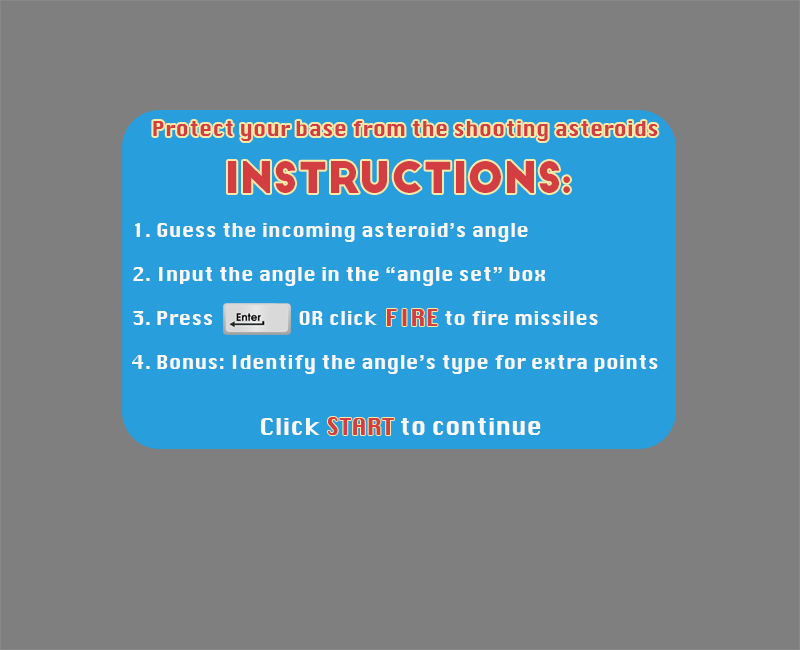
<style>
.page{position:relative;width:800px;height:650px;background:#7f7f7f}
.page>*{position:absolute;margin:0}
.t1{font:20px "Krungthep";letter-spacing:0.007em;color:#d33e43}
.t2{font:42px "BigJohn";color:#d33e43}
.t3{font:19px/44px "Krungthep";letter-spacing:0.007em;color:#f9f8f9}
.t4{font:20px/44px "Krungthep";letter-spacing:0.007em;color:#f9f8f9}
.t5{font:23.3px "Krungthep";color:#d33e43}
.t6{font:23.3px "Krungthep";color:#f9f8f9}
.t7{font:34.8px "Krungthep";color:#f9f8f9}
</style>
<div class="page">
<p class="t1" style="left:153px;top:121px;width:505px;height:20px">Protect your base from the shooting asteroids</p>
<p class="t2" style="left:228px;top:161px;width:342px;height:32px">instructions:</p>
<p class="t3" style="left:132px;top:223px;width:526px;height:151px"><span class="t4"><br></span>1. Guess the incoming asteroid’s angle <br>2. Input the angle in the “angle set” box<br>3. Press        OR click              to fire missiles <br>4. Bonus: Identify the angle’s type for extra points</p>
<p class="t5" style="left:387px;top:309px;width:51px;height:17px">FIRE</p>
<p class="t6" style="left:261px;top:418px;width:280px;height:17px"><span class="t7"><br></span>Click              to continue</p>
<p class="t5" style="left:328px;top:417px;width:66px;height:18px">START</p>
</div>
